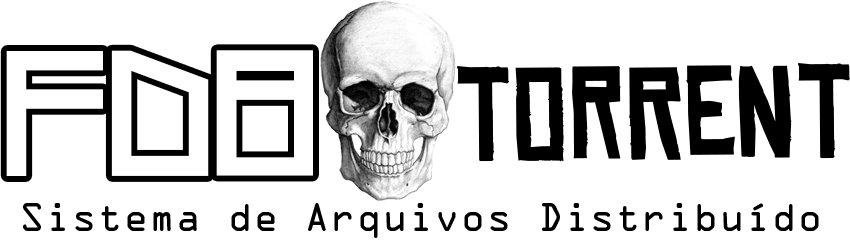
<style>
.page{position:relative;width:850px;height:250px;background:#ffffff}
.page>*{position:absolute;margin:0}
.t1{font:125.2px "Westrider2057:FreehandProfit";color:#ffffff}
.t2{font:124.9px "ChineseRocksRg-Regular";color:#000001}
.t3{font:36px "OCRAStd";color:#000000}
</style>
<div class="page">
<p class="t1" style="left:6px;top:50px;width:307px;height:126px">FD8</p>
<p class="t2" style="left:457px;top:63px;width:393px;height:99px">torrent</p>
<p class="t3" style="left:23px;top:203px;width:796px;height:35px">Sistema de Arquivos Distribuído</p>
</div>
